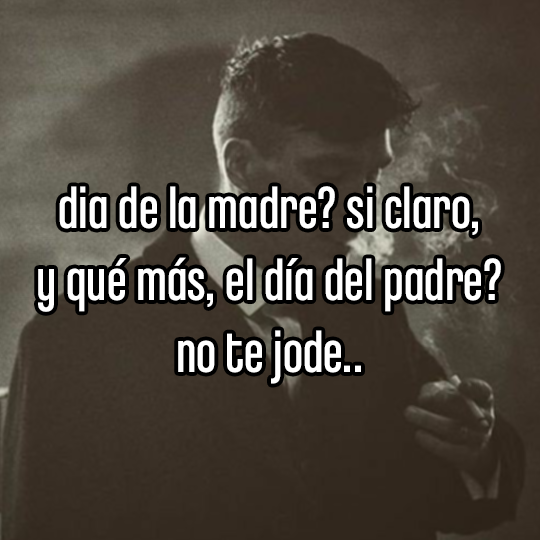
<style>
.page{position:relative;width:540px;height:540px}
.page>*{position:absolute;margin:0}
.t1{font:60px "ChaletComprime-CologneEighty";color:#ffffff}
</style>
<div class="page">
<p class="t1" style="left:38px;top:186px;width:463px;height:198px;text-align:center">dia de la madre? si claro,<br>y qué más, el día del padre?<br>no te jode..</p>
</div>
